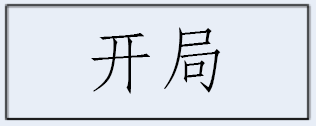
<style>
.page{position:relative;width:316px;height:126px;background:#e8eef7}
.page>*{position:absolute;margin:0}
.t1{font:72px "STFangsong";color:#010101}
</style>
<div class="page">
<p class="t1" style="left:91px;top:27px;width:130px;height:67px">开局</p>
</div>
